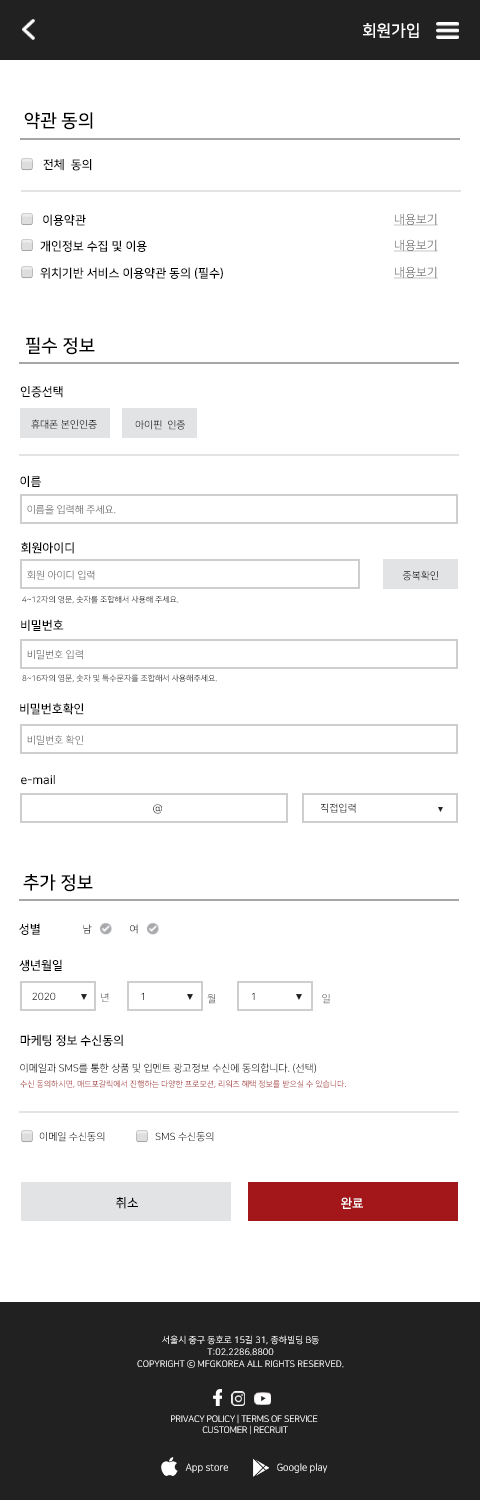
<style>
.page{position:relative;width:480px;height:1500px;background:#ffffff}
.page>*{position:absolute;margin:0}
.t1{font:16px "NanumSquareB";color:#ffffff}
.t2{font:18px "NanumSquareB";color:#000000}
.t3{font:12px "NanumSquareB";color:#000000}
.t4{font:12px "NanumSquareR";color:#757575;text-decoration:underline}
.t5{font:10px "NanumSquareR"}
.t6{font:8px "NanumSquareR"}
.t7{font:10px "NanumSquareR";color:#000000}
.t8{font:12.4px "NanumSquareB";color:#000000}
.t9{font:12.4px "NanumSquareB";color:#ffffff}
.t10{font:9px/12px "NanumSquareR";color:#ffffff}
.t11{font:9px "NanumSquareR";letter-spacing:-0.025em;color:#ffffff}
.t12{font:9.7px "NanumSquareR"}
</style>
<div class="page">
<p class="t1" style="left:363px;top:23px;width:56px;height:15px">회원가입</p>
<p class="t2" style="left:24px;top:112px;width:69px;height:18px">약관 동의</p>
<p class="t3" style="left:43px;top:159px;width:49px;height:12px">전체  동의</p>
<p class="t3" style="left:43px;top:214px;width:43px;height:12px">이용약관</p>
<p class="t4" style="left:394px;top:213px;width:44px;height:13px">내용보기</p>
<p class="t3" style="left:40px;top:240px;width:107px;height:12px">개인정보 수집 및 이용</p>
<p class="t4" style="left:394px;top:239px;width:44px;height:13px">내용보기</p>
<p class="t3" style="left:40px;top:267px;width:183px;height:12px">위치기반 서비스 이용약관 동의 (필수)</p>
<p class="t4" style="left:394px;top:266px;width:44px;height:13px">내용보기</p>
<p class="t2" style="left:26px;top:337px;width:69px;height:18px">필수 정보</p>
<p class="t3" style="left:20px;top:386px;width:43px;height:12px">인증선택</p>
<p class="t5" style="left:31px;top:419px;width:66px;height:10px">휴대폰 본인인증</p>
<p class="t5" style="left:135px;top:420px;width:50px;height:10px">아이핀  인증</p>
<p class="t3" style="left:20px;top:475px;width:21px;height:12px">이름</p>
<p class="t5" style="left:27px;top:505px;width:89px;height:10px">이름을 입력해 주세요.</p>
<p class="t3" style="left:21px;top:542px;width:53px;height:12px">회원아이디</p>
<p class="t5" style="left:27px;top:570px;width:68px;height:10px">회원 아이디 입력</p>
<p class="t5" style="left:402px;top:570px;width:36px;height:11px">중복확인</p>
<p class="t6" style="left:22px;top:595px;width:157px;height:9px">4~12자의 영문, 숫자를 조합해서 사용해 주세요.</p>
<p class="t3" style="left:21px;top:619px;width:43px;height:12px">비밀번호</p>
<p class="t5" style="left:27px;top:650px;width:56px;height:10px">비밀번호 입력</p>
<p class="t6" style="left:22px;top:674px;width:195px;height:9px">8~16자의 영문, 숫자 및 특수문자를 조합해서 사용해주세요.</p>
<p class="t3" style="left:20px;top:703px;width:64px;height:12px">비밀번호확인</p>
<p class="t5" style="left:27px;top:735px;width:56px;height:10px">비밀번호 확인</p>
<p class="t3" style="left:21px;top:775px;width:34px;height:10px">e-mail</p>
<p class="t5" style="left:153px;top:804px;width:9px;height:10px">@</p>
<p class="t5" style="left:320px;top:803px;width:36px;height:10px">직접입력</p>
<p class="t2" style="left:23px;top:874px;width:70px;height:18px">추가 정보</p>
<p class="t3" style="left:19px;top:923px;width:21px;height:12px">성별</p>
<p class="t5" style="left:83px;top:924px;width:9px;height:10px">남</p>
<p class="t5" style="left:130px;top:924px;width:8px;height:10px">여</p>
<p class="t3" style="left:19px;top:959px;width:43px;height:13px">생년월일</p>
<p class="t5" style="left:32px;top:992px;width:24px;height:8px">2020</p>
<p class="t5" style="left:101px;top:993px;width:8px;height:9px">년</p>
<p class="t5" style="left:141px;top:992px;width:3px;height:8px">1</p>
<p class="t5" style="left:207px;top:994px;width:9px;height:10px">월</p>
<p class="t5" style="left:252px;top:992px;width:3px;height:8px">1</p>
<p class="t5" style="left:322px;top:994px;width:8px;height:10px">일</p>
<p class="t3" style="left:20px;top:1034px;width:103px;height:13px">마케팅 정보 수신동의</p>
<p class="t5" style="left:20px;top:1063px;width:296px;height:10px">이메일과 SMS를 통한 상품 및 입멘트 광고정보 수신에 동의합니다. (선택)</p>
<p class="t6" style="left:20px;top:1080px;width:326px;height:8px">수신 동의하시면, 매드포갈릭에서 진행하는 다양한 프로모션, 리워즈 혜택 정보를 받으실 수 있습니다.</p>
<p class="t5" style="left:39px;top:1132px;width:66px;height:10px">이메일 수신동의</p>
<p class="t7" style="left:155px;top:1132px;width:59px;height:10px">SMS 수신동의</p>
<p class="t8" style="left:116px;top:1197px;width:22px;height:12px">취소</p>
<p class="t9" style="left:341px;top:1197px;width:22px;height:12px">완료</p>
<p class="t10" style="left:137px;top:1335px;width:207px;height:33px;text-align:center">서울시 중구 동호로 15길 31, 종하빌딩 B동<br>T:02.2286.8800<br>COPYRIGHT ⓒ MFGKOREA ALL RIGHTS RESERVED.</p>
<p class="t11" style="left:171px;top:1414px;width:147px;height:21px;text-align:center">PRIVACY POLICY | TERMS OF SERVICE <br>CUSTOMER | RECRUIT</p>
<p class="t12" style="left:185px;top:1463px;width:43px;height:10px">App store</p>
<p class="t12" style="left:277px;top:1463px;width:51px;height:10px">Google play</p>
</div>
